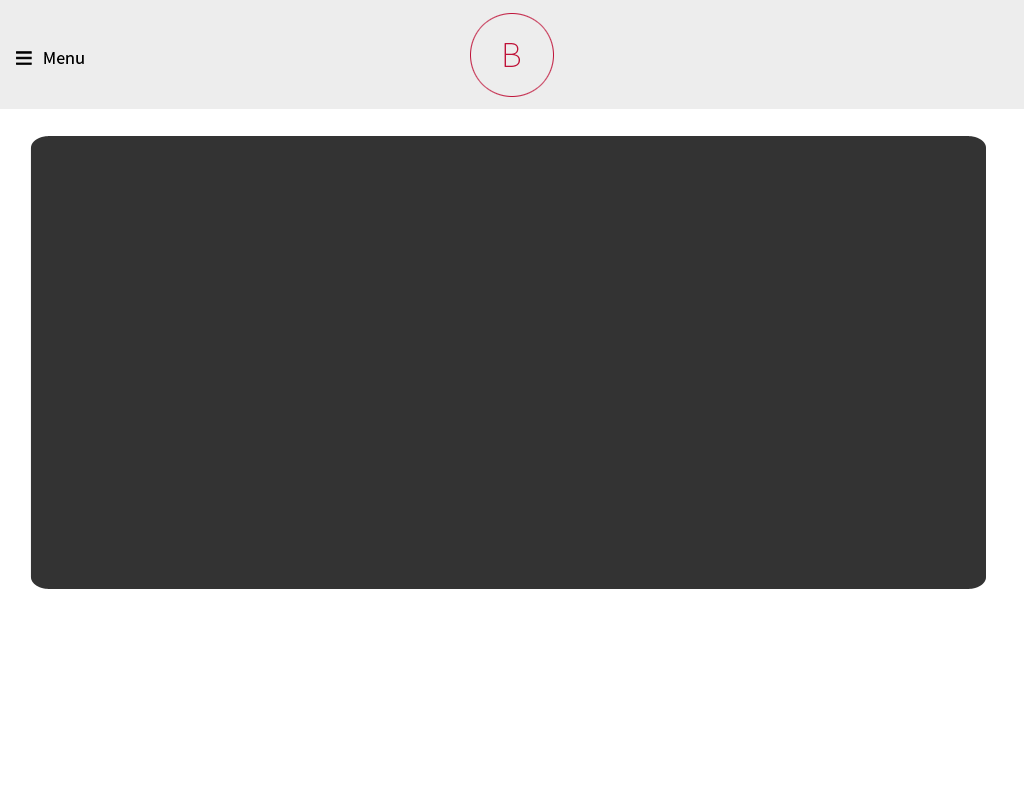
<style>
.page{position:relative;width:1024px;height:786px;background:#333333}
.page>*{position:absolute;margin:0}
.t1{font:18px "SourceSansPro-Regular";color:#000000}
.t2{font:36px "SourceSansPro-ExtraLight";color:#bf1238}
</style>
<div class="page">
<p class="t1" style="left:44px;top:52px;width:40px;height:12px">Menu</p>
<p class="t2" style="left:504px;top:43px;width:16px;height:24px">B</p>
</div>
